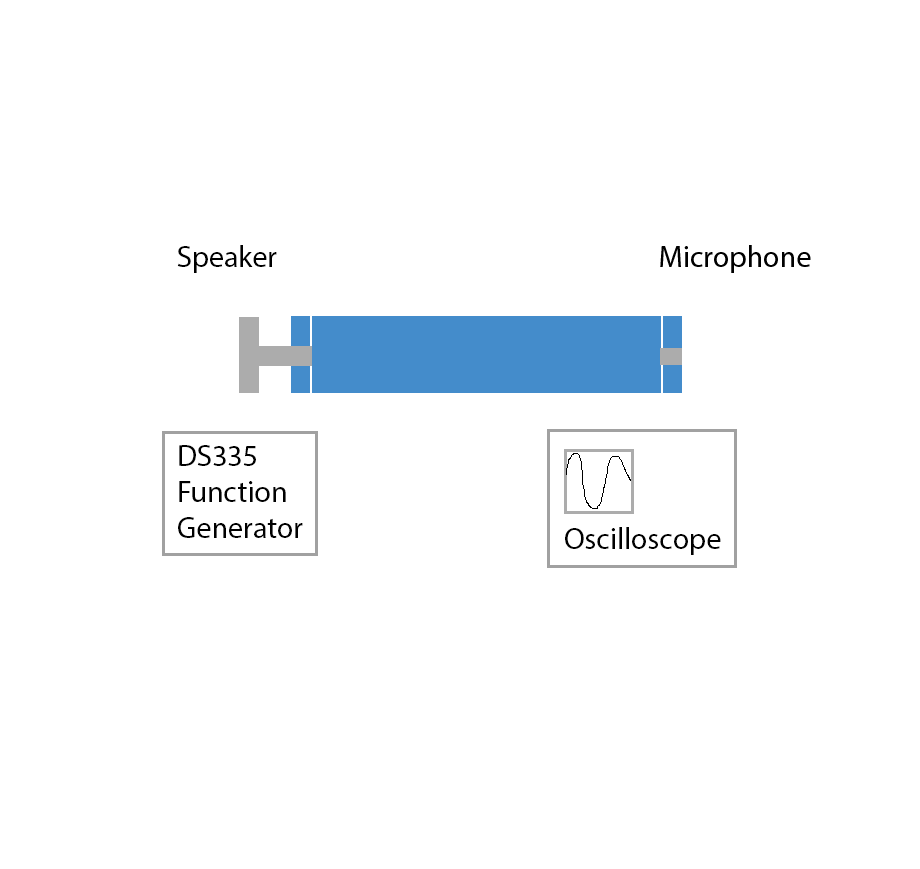
<style>
.page{position:relative;width:920px;height:869px;background:#ffffff}
.page>*{position:absolute;margin:0}
.t1{font:30px "MyriadPro-Regular";color:#000000}
</style>
<div class="page">
<p class="t1" style="left:177px;top:245px;width:100px;height:28px">Speaker</p>
<p class="t1" style="left:178px;top:445px;width:125px;height:93px">DS335 Function Generator</p>
<p class="t1" style="left:565px;top:527px;width:156px;height:28px">Oscilloscope</p>
</div>
